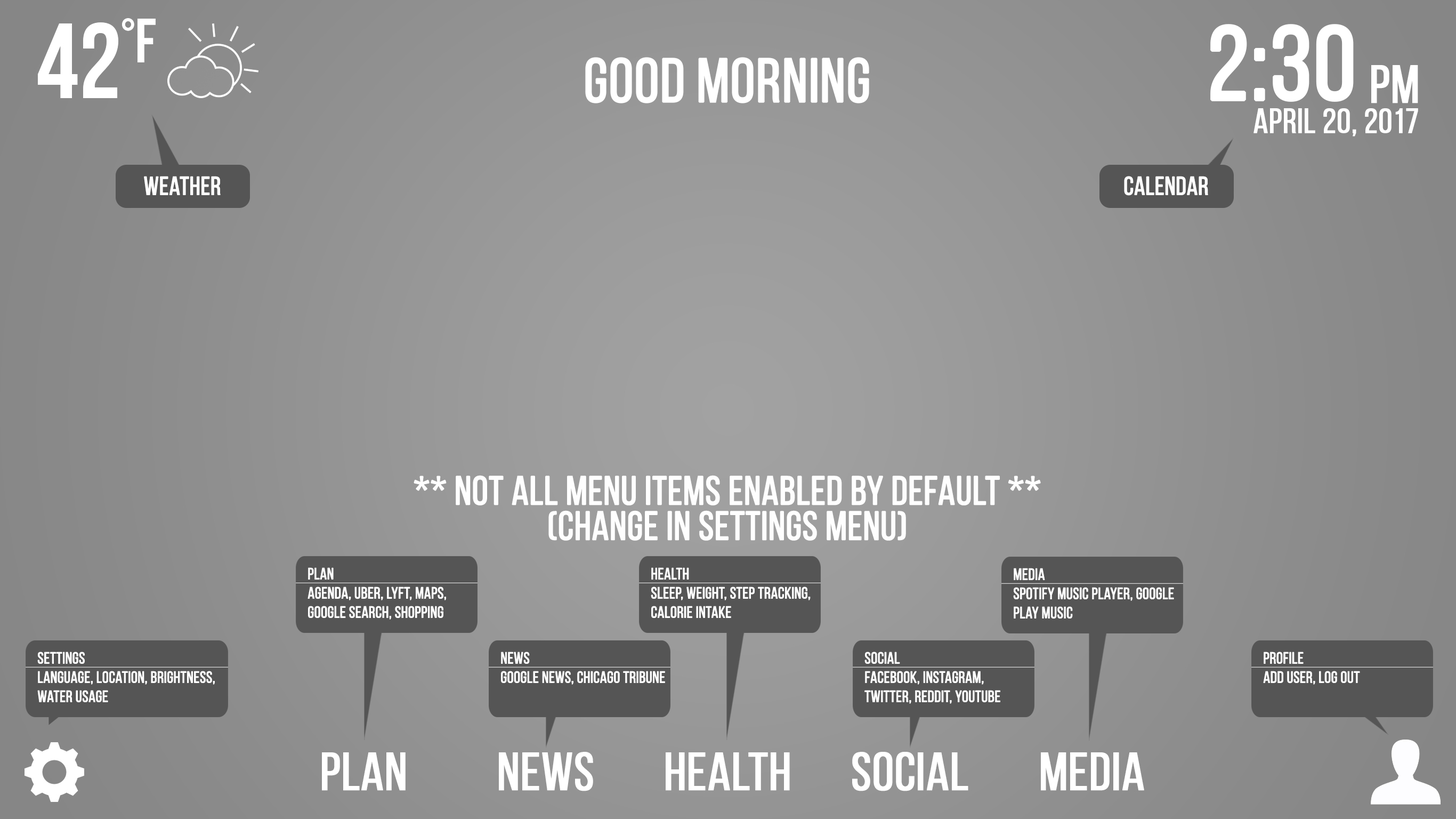
<style>
.page{position:relative;width:1456px;height:819px}
.page>*{position:absolute;margin:0}
.t1{font:25.6px "BebasNeueRegular";color:#fefefe;font-weight:bold}
.t2{font:40.1px/35.2px "BebasNeueRegular";color:#fefefe;font-weight:bold}
.t3{font:16px "BebasNeueRegular";color:#fefefe;font-weight:bold}
</style>
<div class="page">
<p class="t1" style="left:144px;top:176px;width:77px;height:19px">Weather</p>
<p class="t1" style="left:1124px;top:176px;width:84px;height:20px">CALENDAR</p>
<p class="t2" style="left:414px;top:475px;width:627px;height:66px;text-align:center">** Not all menu items enabled by default **<br>(Change in settings menu)</p>
<p class="t3" style="left:308px;top:567px;width:138px;height:52px">PLAN<br>Agenda, Uber, Lyft, Maps, Google Search, Shopping</p>
<p class="t3" style="left:651px;top:567px;width:160px;height:51px">Health<br>Sleep, Weight, Step Tracking, Calorie Intake</p>
<p class="t3" style="left:1013px;top:568px;width:161px;height:51px">Media<br>Spotify Music Player, Google Play Music</p>
<p class="t3" style="left:37px;top:651px;width:178px;height:52px">Settings<br>Language, location, brightness, <br>water usage</p>
<p class="t3" style="left:501px;top:651px;width:164px;height:33px">News<br>Google News, Chicago Tribune</p>
<p class="t3" style="left:865px;top:651px;width:136px;height:53px">Social<br>Facebook, Instagram, <br>Twitter, Reddit, Youtube</p>
<p class="t3" style="left:1263px;top:651px;width:97px;height:33px">Profile<br>Add User, Log out</p>
</div>
